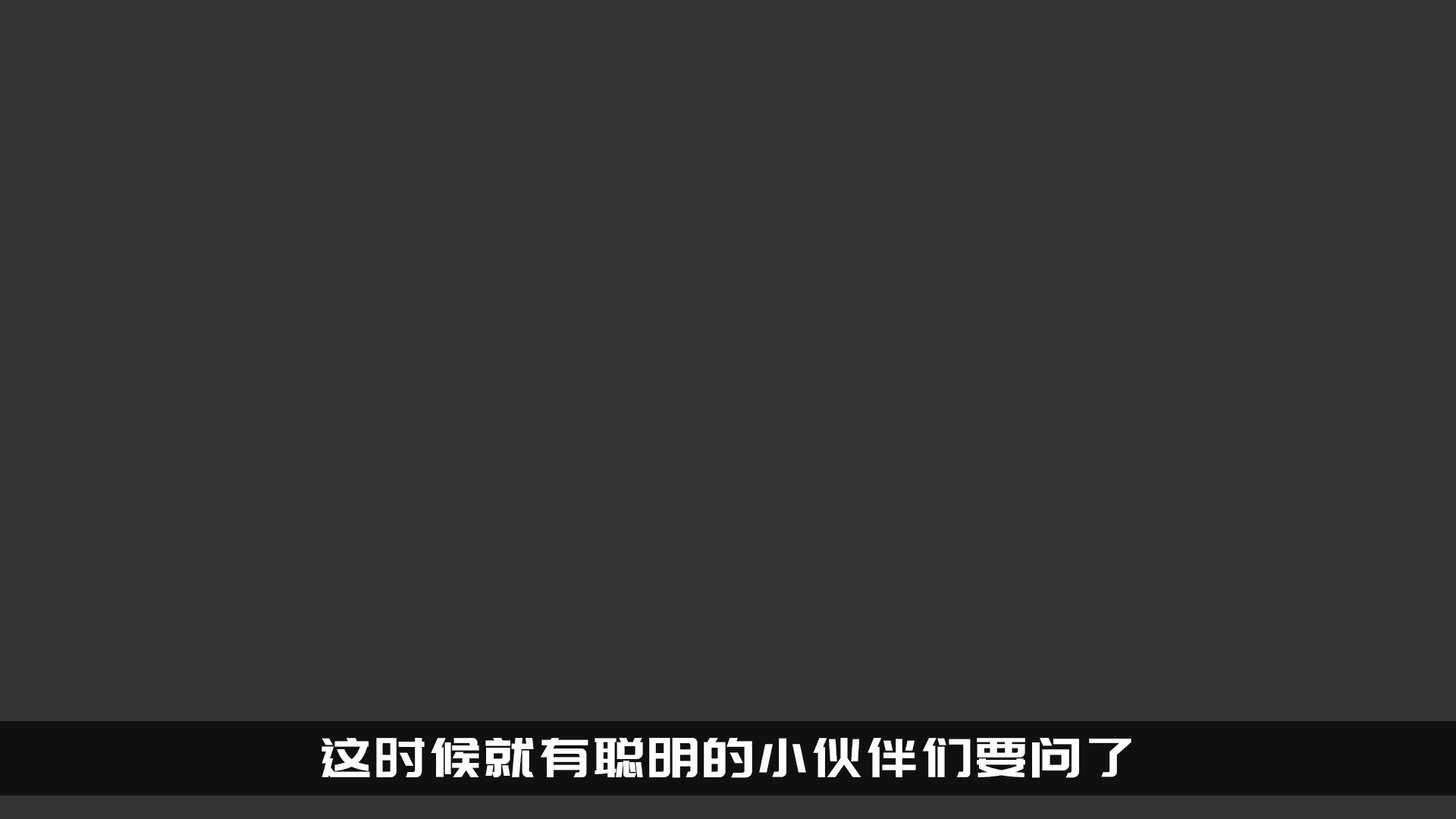
<style>
.page{position:relative;width:1456px;height:819px;background:#333333}
.page>*{position:absolute;margin:0}
.t1{font:54.6px "PangMenZhengDao-3";color:#ffffff}
</style>
<div class="page">
<p class="t1" style="left:322px;top:738px;width:809px;height:40px">这时候就有聪明的小伙伴们要问了</p>
</div>
